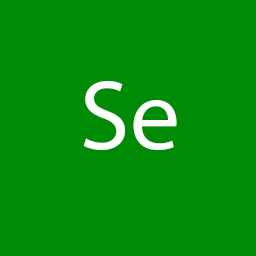
<style>
.page{position:relative;width:256px;height:256px;background:#008b07}
.page>*{position:absolute;margin:0}
.t1{font:100px "MyriadPro-Regular";color:#ffffff}
</style>
<div class="page">
<p class="t1" style="left:83px;top:81px;width:94px;height:69px">Se</p>
</div>
